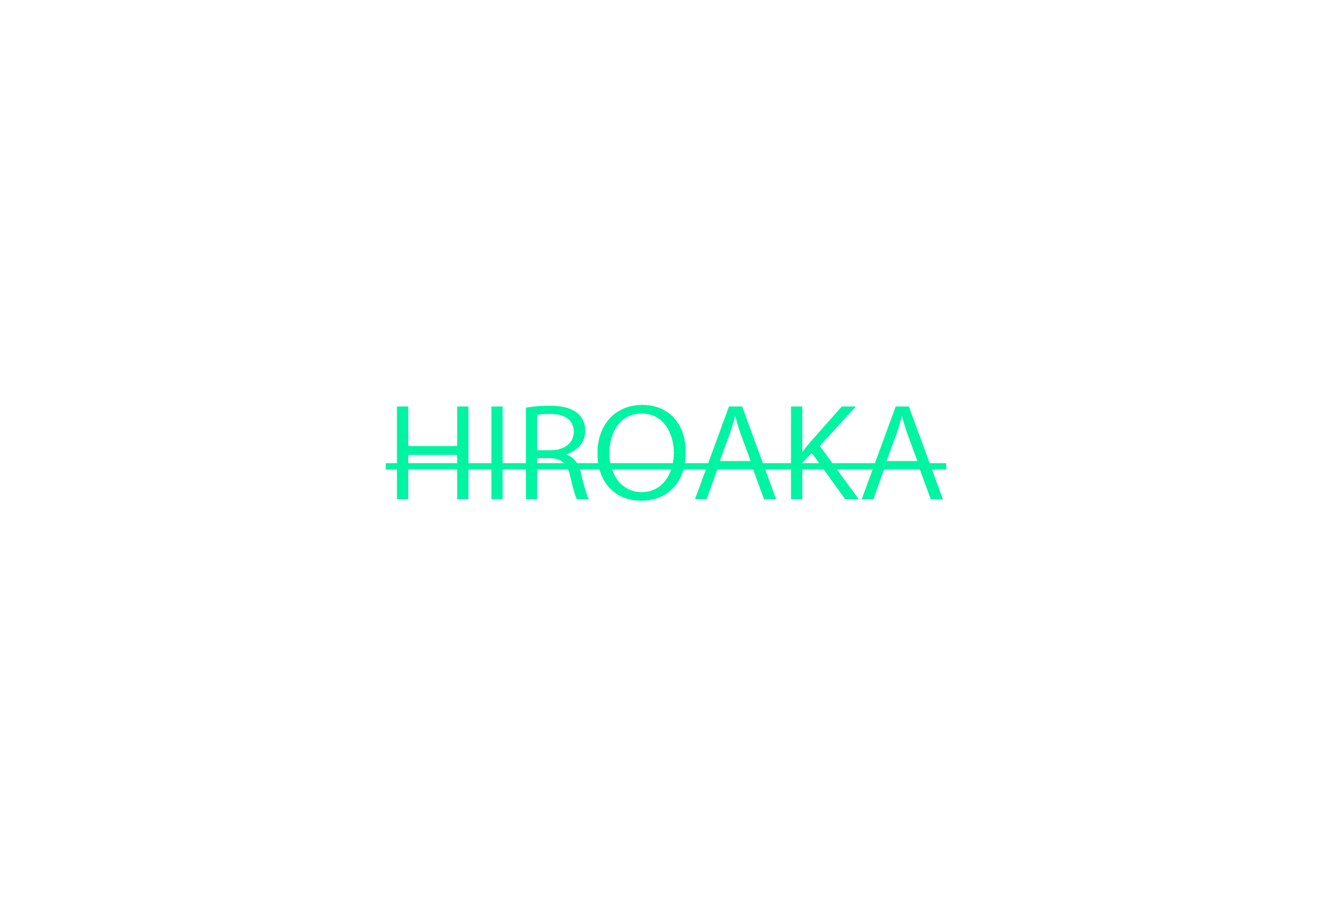
<style>
.page{position:relative;width:1328px;height:898px;background:#ffffff}
.page>*{position:absolute;margin:0}
.t1{font:173.8px "KozGoPr6N-Regular";color:#00f4a1;font-variant:small-caps;scale:1.11 1}
</style>
<div class="page">
<p class="t1" style="left:386px;top:405px;width:561px;height:96px">hiroaka</p>
</div>
